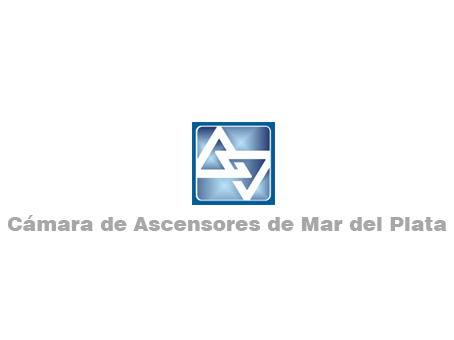
<style>
.page{position:relative;width:454px;height:340px;background:#ffffff}
.page>*{position:absolute;margin:0}
.t1{font:20px "Swiss721BT-Black";color:#a7a7a7}
</style>
<div class="page">
<p class="t1" style="left:7px;top:215px;width:440px;height:16px">Cámara de Ascensores de Mar del Plata</p>
</div>
